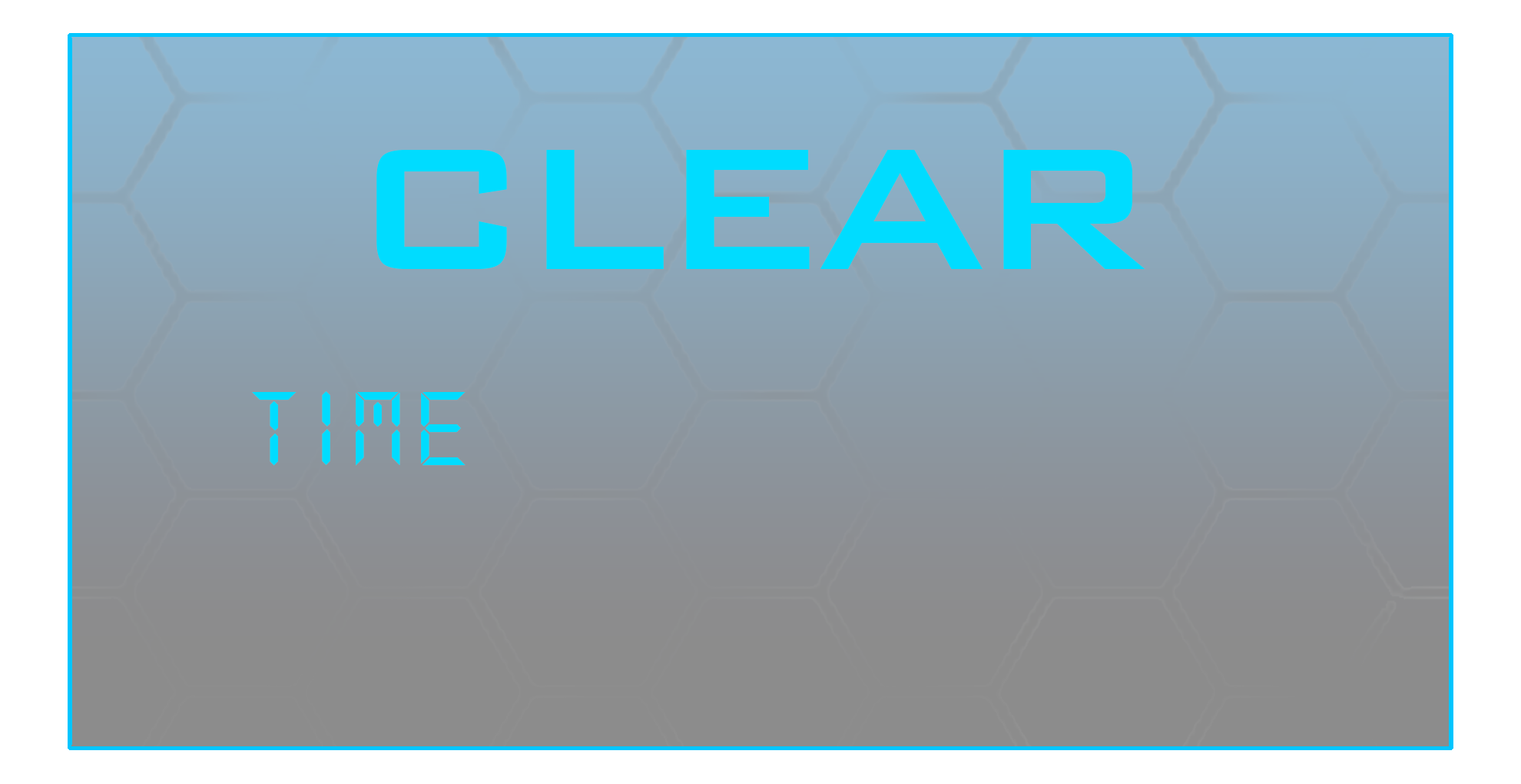
<style>
.page{position:relative;width:1521px;height:784px}
.page>*{position:absolute;margin:0}
.t1{font:230.5px "BankGothicBT-Medium";letter-spacing:-0.075em;color:#00dcff}
.t2{font:115.3px "DS-Digital";letter-spacing:0.075em;color:#00dcff}
</style>
<div class="page">
<p class="t1" style="left:377px;top:150px;width:769px;height:119px">CLEAR</p>
<p class="t2" style="left:252px;top:391px;width:214px;height:75px">time</p>
</div>
